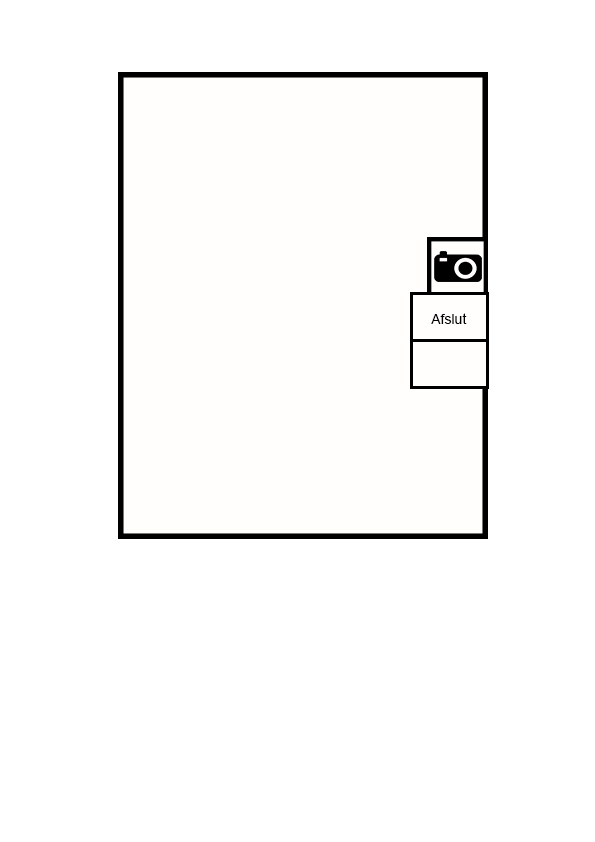
<style>
.page{position:relative;width:595px;height:842px;background:#ffffff}
.page>*{position:absolute;margin:0}
.t1{font:14px "ArialMT";color:#000000}
</style>
<div class="page">
<p class="t1" style="left:431px;top:313px;width:36px;height:11px">Afslut</p>
</div>
